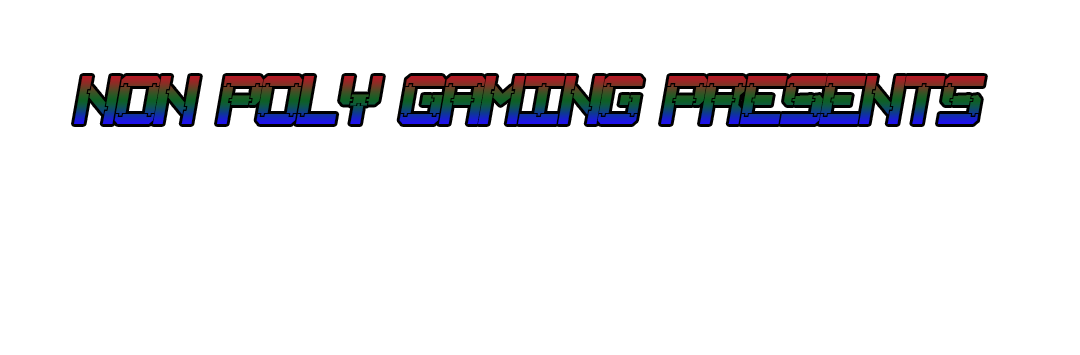
<style>
.page{position:relative;width:1080px;height:355px;background:#ffffff}
.page>*{position:absolute;margin:0}
.t1{font:60px "SquareWood-7";letter-spacing:-0.1em;font-style:italic}
</style>
<div class="page">
<p class="t1" style="left:74px;top:76px;width:911px;height:48px">non poly Gaming Presents</p>
</div>
